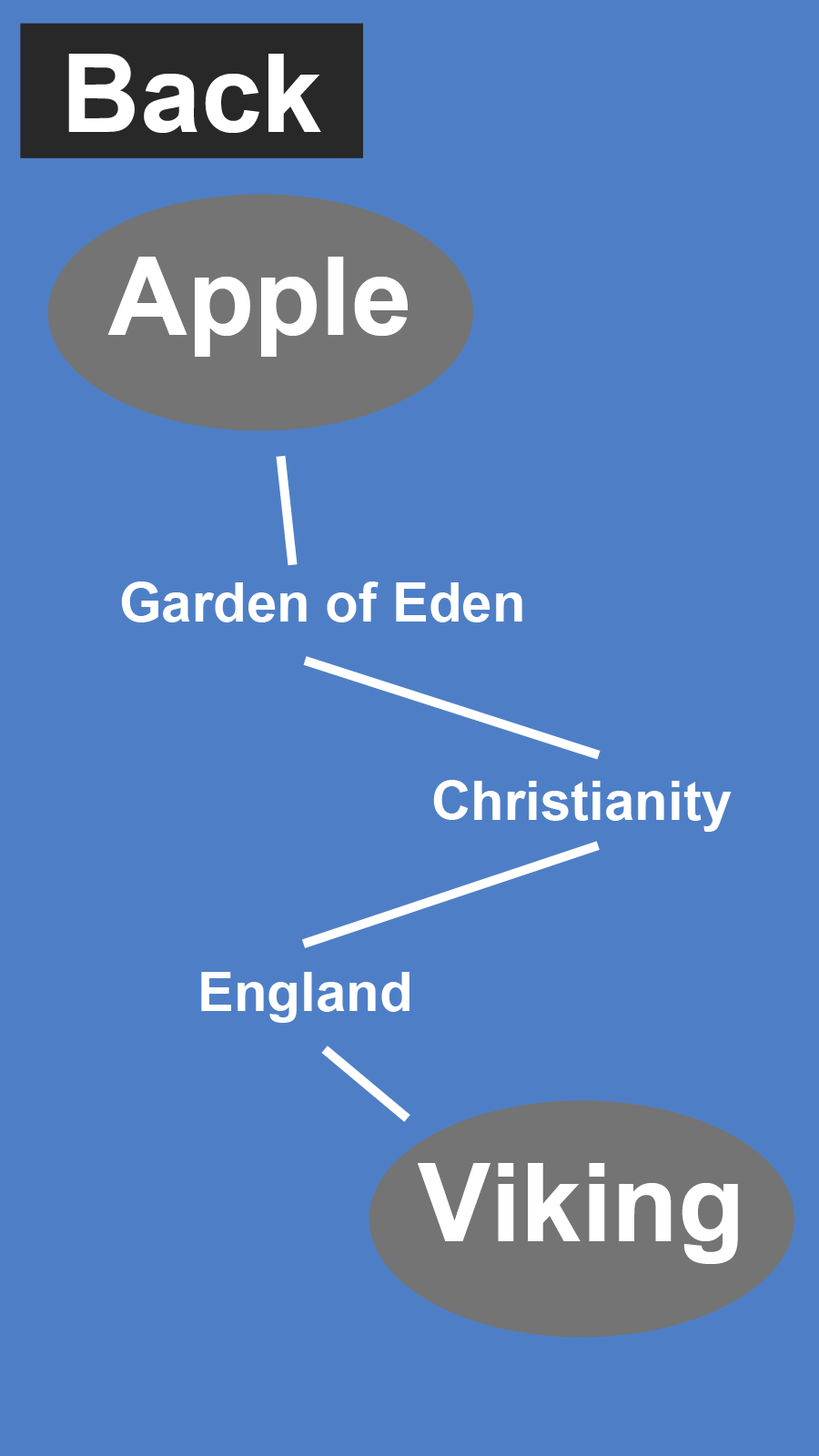
<style>
.page{position:relative;width:819px;height:1456px;background:#4e7fc6}
.page>*{position:absolute;margin:0}
.t1{font:109.2px "Arial-BoldMT";color:#ffffff}
.t2{font:54.6px "Arial-BoldMT";color:#ffffff}
</style>
<div class="page">
<p class="t1" style="left:68px;top:54px;width:253px;height:79px">Back</p>
<p class="t1" style="left:107px;top:257px;width:301px;height:100px">Apple</p>
<p class="t2" style="left:121px;top:581px;width:401px;height:41px">Garden of Eden</p>
<p class="t2" style="left:433px;top:780px;width:299px;height:52px">Christianity</p>
<p class="t2" style="left:201px;top:972px;width:208px;height:51px">England</p>
<p class="t1" style="left:417px;top:1163px;width:321px;height:101px">Viking</p>
</div>
